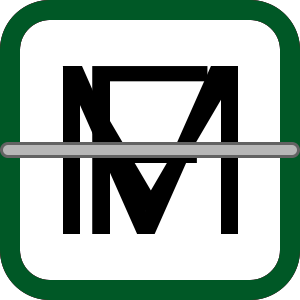
<style>
.page{position:relative;width:300px;height:300px;background:#ffffff}
.page>*{position:absolute;margin:0}
.t1{font:240px "Montserrat-Regular";color:#000000}
</style>
<div class="page">
<p class="t1" style="left:62px;top:66px;width:167px;height:168px">V</p>
<p class="t1" style="left:63px;top:66px;width:175px;height:168px">M</p>
<p class="t1" style="left:92px;top:66px;width:116px;height:168px">F</p>
</div>
